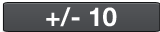
<style>
.page{position:relative;width:160px;height:32px}
.page>*{position:absolute;margin:0}
.t1{font:26px "HelveticaNeueBold";color:#ffffff}
</style>
<div class="page">
<p class="t1" style="left:46px;top:7px;width:71px;height:20px">+/- 10</p>
</div>
